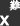
<style>
.page{position:relative;width:20px;height:26px;background:#333333}
.page>*{position:absolute;margin:0}
.t1{font:12px "DFKaiShu-SB-Estd-BF";color:#ffffff;font-weight:bold}
.t2{font:18px "ArialMT";color:#ffffff;font-weight:bold}
</style>
<div class="page">
<p class="t1" style="left:9px;top:0px;width:12px;height:11px">難</p>
<p class="t2" style="left:0px;top:15px;width:10px;height:11px">x</p>
</div>
